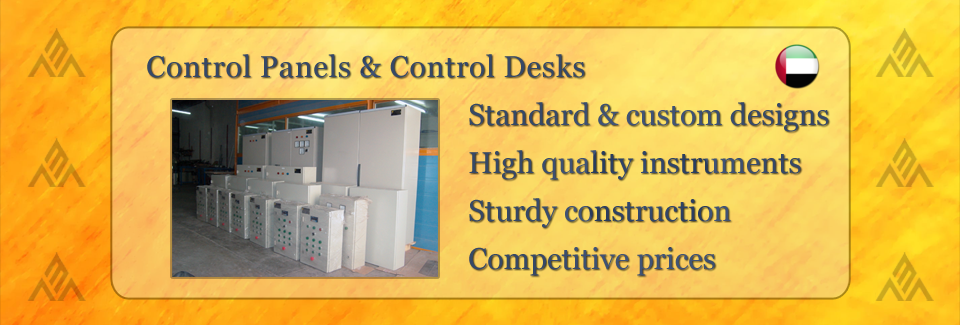
<style>
.page{position:relative;width:960px;height:325px}
.page>*{position:absolute;margin:0}
.t1{font:30px "Georgia";letter-spacing:0.025em;color:#364866}
.t2{font:30px/48px "Georgia";color:#364868}
</style>
<div class="page">
<p class="t1" style="left:147px;top:54px;width:438px;height:24px">Control Panels &amp; Control Desks</p>
<p class="t2" style="left:469px;top:102px;width:360px;height:174px">Standard &amp; custom designs<br>High quality instruments<br>Sturdy construction<br>Competitive prices</p>
</div>
